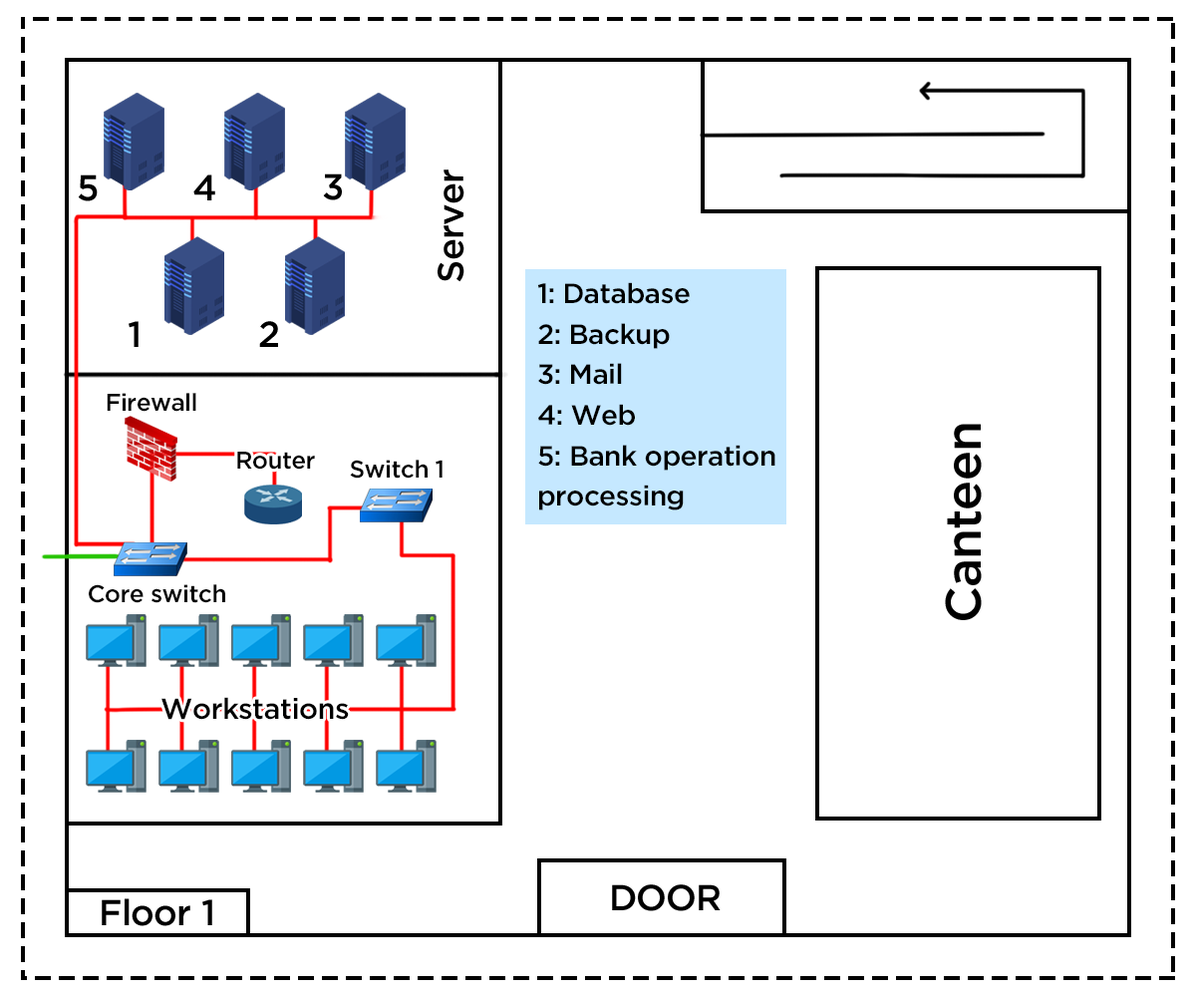
<style>
.page{position:relative;width:1196px;height:997px;background:#ffffff}
.page>*{position:absolute;margin:0}
.t1{font:36px "iCielGotham-Medium";letter-spacing:-0.02em;color:#000000}
.t2{font:27.9px/40.6px "iCielGotham-Medium";letter-spacing:-0.02em;color:#000000}
.t3{font:24.2px "iCielGotham-Medium";letter-spacing:-0.02em;color:#000000}
.t4{font:49.6px "iCielGotham-Medium";letter-spacing:-0.02em;color:#000000}
.t5{font:28.9px "iCielGotham-Medium";letter-spacing:-0.02em;color:#000000}
</style>
<div class="page">
<p class="t1" style="left:323px;top:173px;width:19px;height:27px">3</p>
<p class="t1" style="left:438px;top:169px;width:27px;height:113px;rotate:-90deg">Server</p>
<p class="t1" style="left:78px;top:174px;width:20px;height:27px">5</p>
<p class="t1" style="left:193px;top:174px;width:22px;height:26px">4</p>
<p class="t2" style="left:537px;top:282px;width:239px;height:228px">1: Database <br>2: Backup<br>3: Mail<br>4: Web<br>5: Bank operation <br>processing</p>
<p class="t1" style="left:129px;top:321px;width:10px;height:26px">1</p>
<p class="t1" style="left:259px;top:321px;width:19px;height:26px">2</p>
<p class="t3" style="left:107px;top:393px;width:89px;height:19px">Firewall</p>
<p class="t4" style="left:945px;top:424px;width:37px;height:196px;rotate:-90deg">Canteen</p>
<p class="t3" style="left:237px;top:452px;width:78px;height:18px">Router</p>
<p class="t3" style="left:350px;top:460px;width:93px;height:18px">Switch 1</p>
<p class="t3" style="left:89px;top:584px;width:136px;height:19px">Core switch</p>
<p class="t5" style="left:161px;top:697px;width:188px;height:23px">Workstations</p>
<p class="t1" style="left:612px;top:884px;width:109px;height:27px">DOOR</p>
<p class="t1" style="left:102px;top:898px;width:110px;height:28px">Floor 1</p>
</div>
